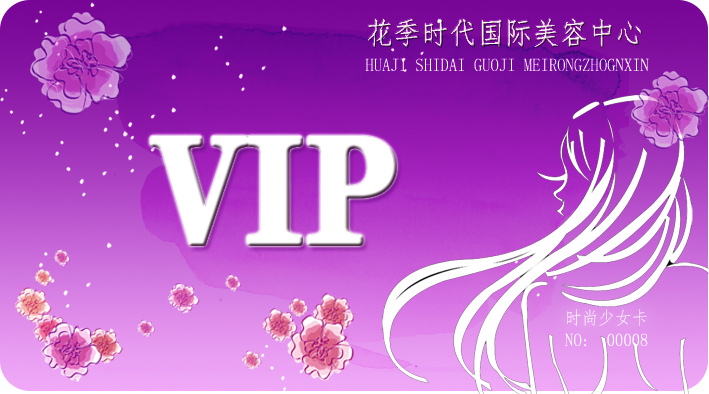
<style>
.page{position:relative;width:709px;height:394px}
.page>*{position:absolute;margin:0}
.t1{font:30.6px "·ÂËÎ";color:#ffffff;scale:0.91 1}
.t2{font:18.3px "·ÂËÎ";color:#ffffff;scale:0.91 1}
.t3{font:152.8px "FZCHSJW--GB1-0";color:#ffffff;font-weight:bold;scale:0.91 1}
</style>
<div class="page">
<p class="t1" style="left:368px;top:18px;width:273px;height:30px">花季时代国际美容中心</p>
<p class="t2" style="left:365px;top:58px;width:284px;height:14px">HUAJI SHIDAI GUOJI MEIRONGZHOGNXIN</p>
<p class="t3" style="left:150px;top:136px;width:246px;height:109px">VIP</p>
<p class="t2" style="left:567px;top:309px;width:80px;height:17px">时尚少女卡</p>
<p class="t2" style="left:565px;top:333px;width:83px;height:14px">NO:  00008</p>
</div>
